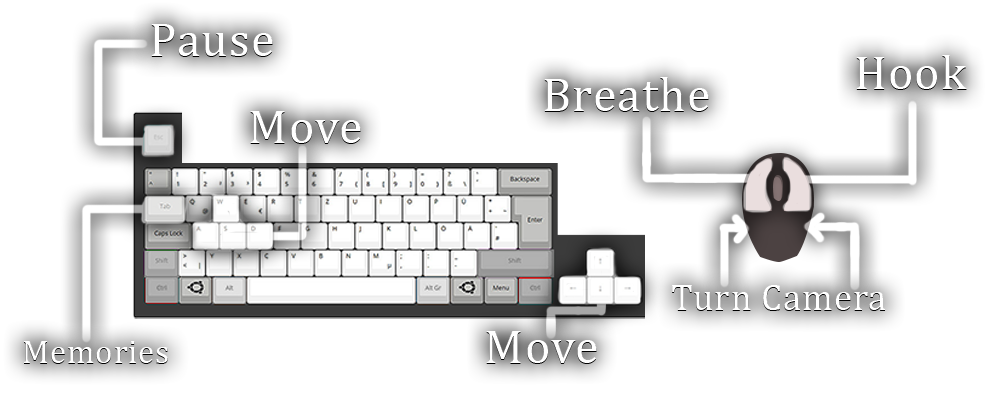
<style>
.page{position:relative;width:990px;height:411px;background:#ffffff}
.page>*{position:absolute;margin:0}
.t1{font:48px "Cambria";letter-spacing:0.025em;color:#ffffff}
.t2{font:37px "Cambria";letter-spacing:0.025em;color:#ffffff}
.t3{font:33px "Cambria";letter-spacing:0.025em;color:#ffffff}
</style>
<div class="page">
<p class="t1" style="left:151px;top:24px;width:122px;height:32px">Pause</p>
<p class="t1" style="left:856px;top:55px;width:111px;height:34px">Hook</p>
<p class="t1" style="left:544px;top:77px;width:165px;height:34px">Breathe</p>
<p class="t1" style="left:250px;top:111px;width:111px;height:32px">Move</p>
<p class="t2" style="left:672px;top:285px;width:213px;height:25px">Turn Camera</p>
<p class="t3" style="left:24px;top:341px;width:144px;height:22px">Memories</p>
<p class="t1" style="left:486px;top:331px;width:111px;height:32px">Move</p>
</div>
